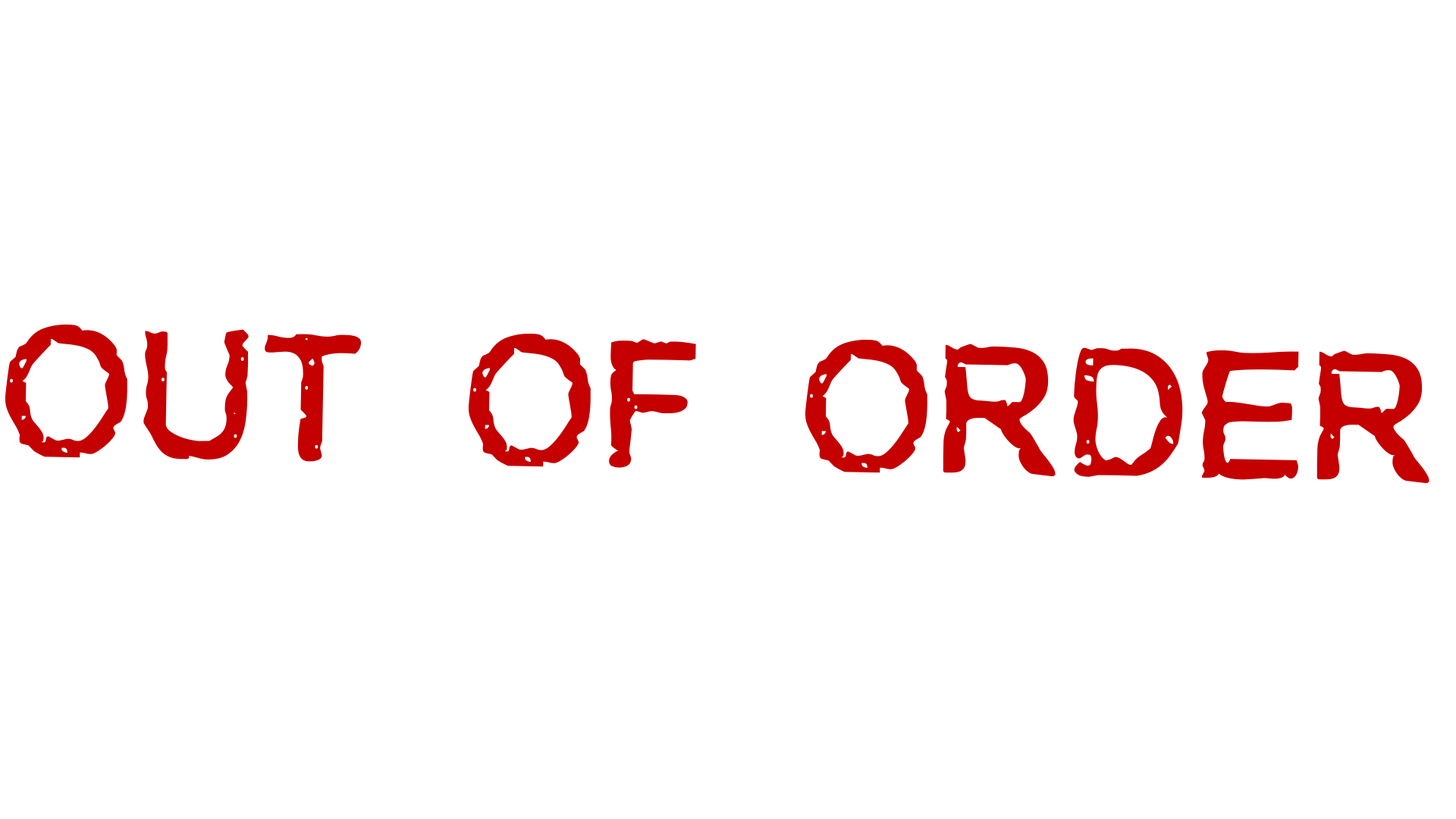
<style>
.page{position:relative;width:1456px;height:819px;background:#ffffff}
.page>*{position:absolute;margin:0}
.t1{font:183.6px "Stamped!";color:#c40000}
</style>
<div class="page">
<p class="t1" style="left:5px;top:325px;width:1424px;height:159px;rotate:1deg">OUT OF ORDER</p>
</div>
